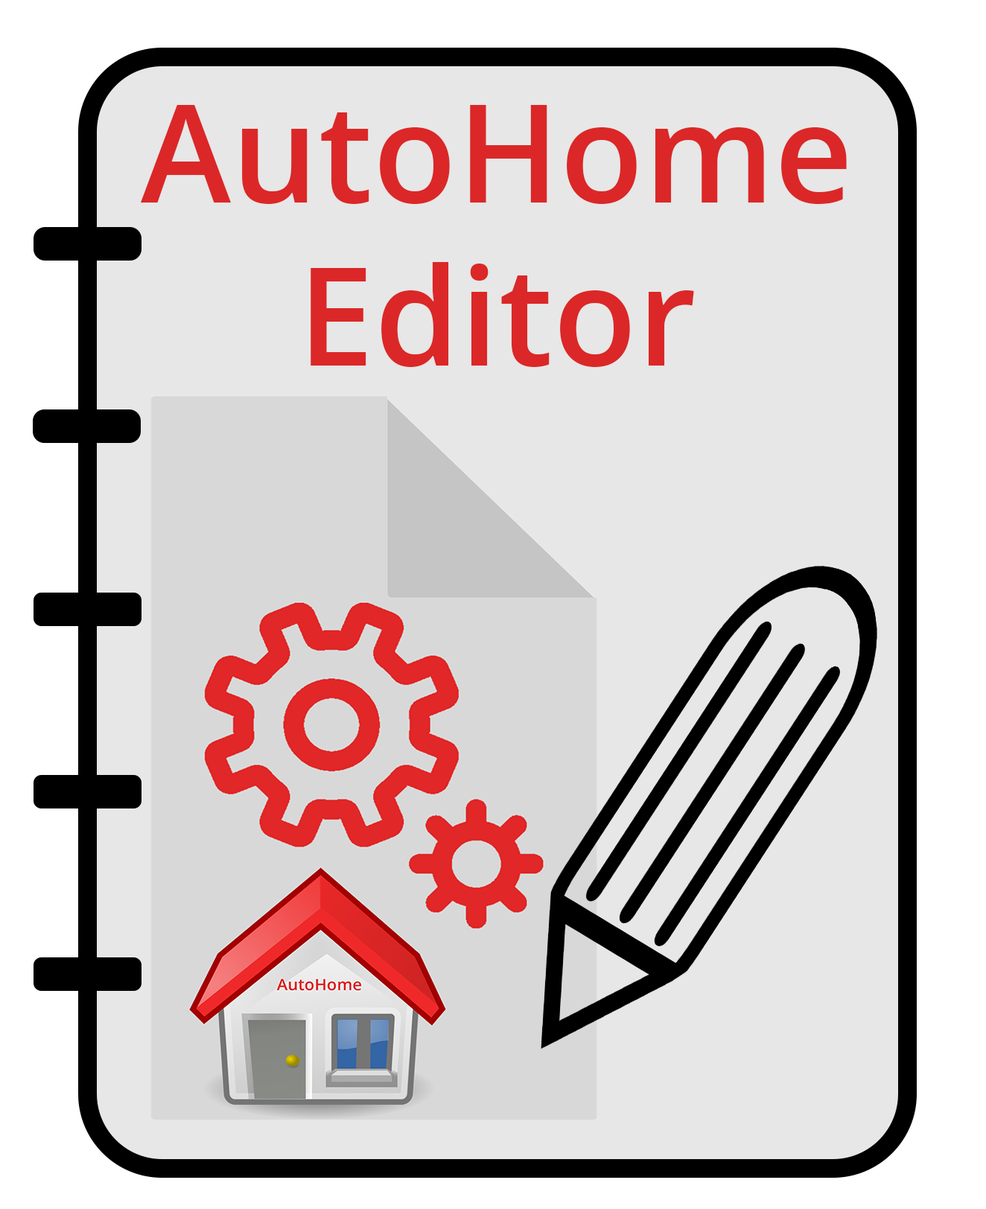
<style>
.page{position:relative;width:986px;height:1209px;background:#e7e7e7}
.page>*{position:absolute;margin:0}
.t1{font:136.2px "OpenSans-Semibold";letter-spacing:0.005em;color:#db2727}
</style>
<div class="page">
<p class="t1" style="left:141px;top:105px;width:706px;height:262px;text-align:center">AutoHome <br>Editor</p>
</div>
